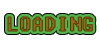
<style>
.page{position:relative;width:100px;height:50px;background:#ffffff}
.page>*{position:absolute;margin:0}
.t1{font:20px "Fixedsys";color:#885f17}
</style>
<div class="page">
<p class="t1" style="left:8px;top:17px;width:85px;height:14px">LOADING</p>
<p class="t1" style="left:8px;top:17px;width:85px;height:14px">LOADING</p>
<p class="t1" style="left:8px;top:17px;width:85px;height:14px">LOADING</p>
</div>
